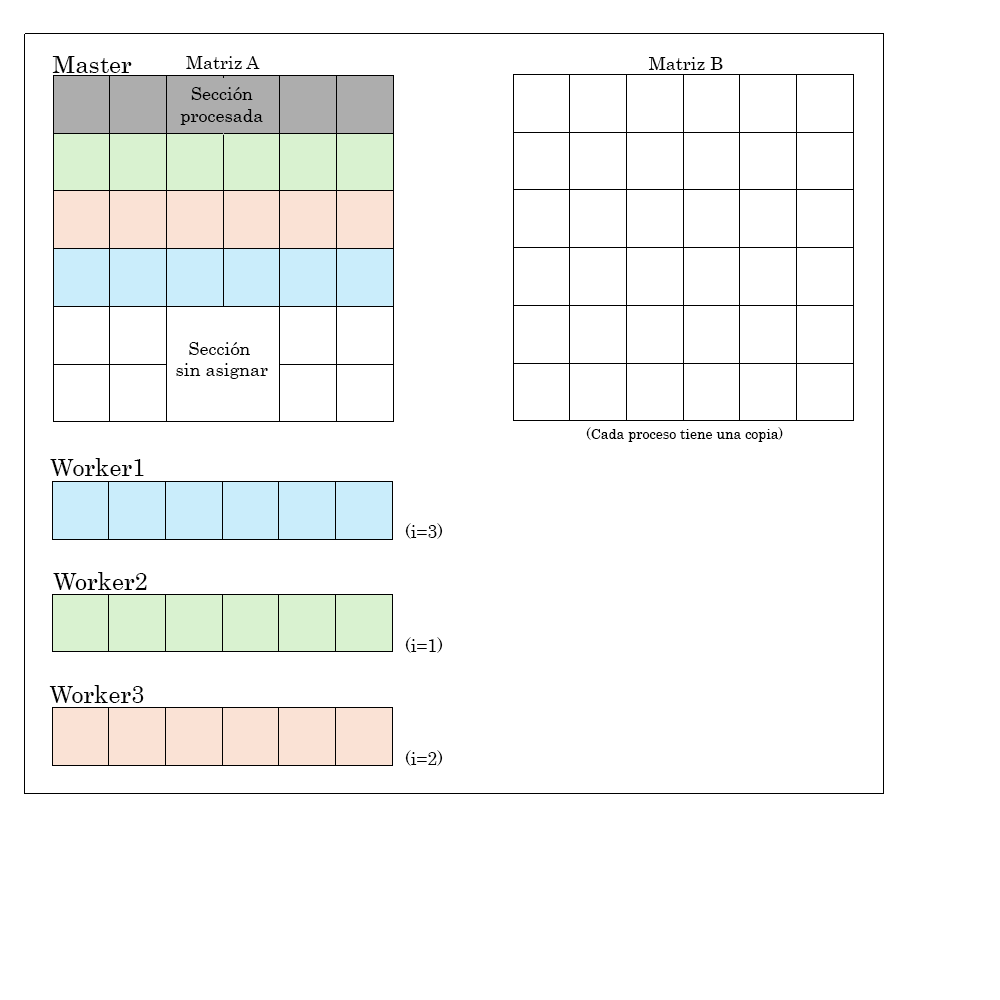
<style>
.page{position:relative;width:1000px;height:1000px;background:#ffffff}
.page>*{position:absolute;margin:0}
.t1{font:24px "Century";color:#000000}
.t2{font:18px "Century";color:#000000}
.t3{font:14px "Century";color:#000000}
</style>
<div class="page">
<p class="t1" style="left:52px;top:56px;width:80px;height:17px">Master</p>
<p class="t2" style="left:186px;top:56px;width:74px;height:13px">Matriz A</p>
<p class="t2" style="left:648px;top:57px;width:75px;height:13px">Matriz B</p>
<p class="t2" style="left:180px;top:87px;width:83px;height:38px;text-align:center">Sección<br>procesada</p>
<p class="t2" style="left:176px;top:342px;width:92px;height:37px;text-align:center">Sección <br>sin asignar</p>
<p class="t3" style="left:586px;top:427px;width:197px;height:15px">(Cada proceso tiene una copia)</p>
<p class="t1" style="left:50px;top:458px;width:94px;height:18px">Worker1</p>
<p class="t2" style="left:405px;top:523px;width:38px;height:16px">(i=3)</p>
<p class="t1" style="left:53px;top:572px;width:94px;height:18px">Worker2</p>
<p class="t2" style="left:405px;top:637px;width:38px;height:16px">(i=1)</p>
<p class="t1" style="left:49px;top:685px;width:95px;height:18px">Worker3</p>
<p class="t2" style="left:405px;top:750px;width:38px;height:16px">(i=2)</p>
</div>
